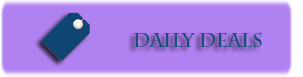
<style>
.page{position:relative;width:303px;height:77px;background:#b081f1}
.page>*{position:absolute;margin:0}
.t1{font:18.7px "CharlemagneStd-Bold";color:#194e78}
</style>
<div class="page">
<p class="t1" style="left:133px;top:31px;width:129px;height:19px">Daily Deals</p>
</div>
